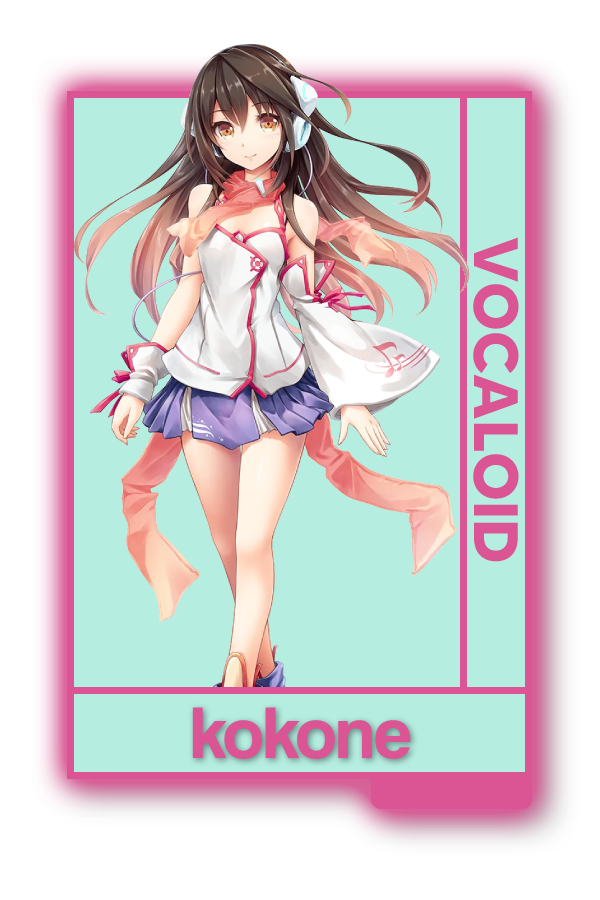
<style>
.page{position:relative;width:600px;height:900px;background:#b5ede1}
.page>*{position:absolute;margin:0}
.t1{font:62.5px "MADETOMMY-Bold";color:#db5493}
.t2{font:75px "CoolveticaRg-Regular";color:#db5493}
</style>
<div class="page">
<p class="t1" style="left:473px;top:237px;width:46px;height:325px;rotate:90deg">VOCALOID</p>
<p class="t2" style="left:192px;top:707px;width:219px;height:52px">kokone</p>
</div>
